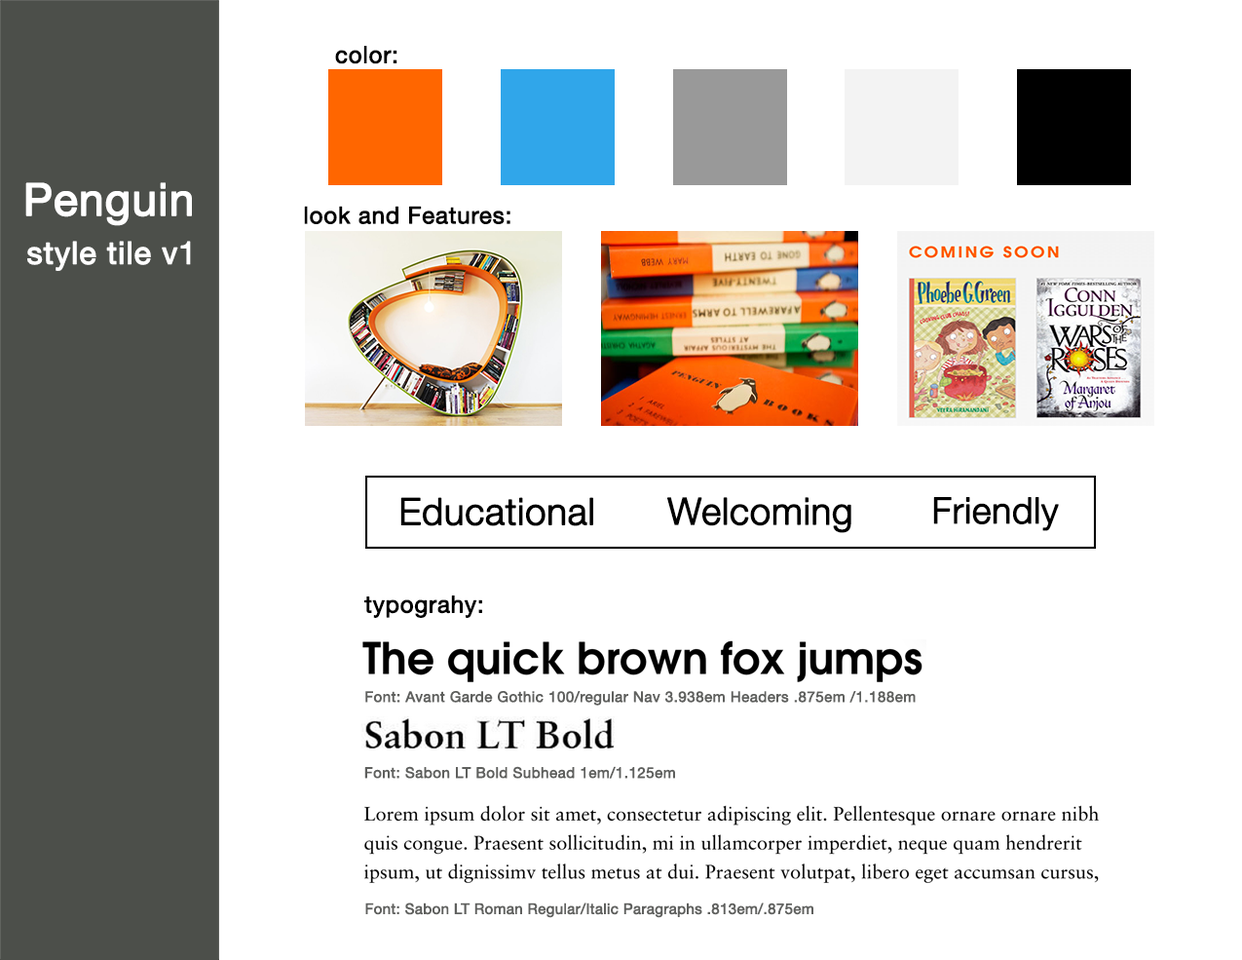
<style>
.page{position:relative;width:1242px;height:960px;background:#ffffff}
.page>*{position:absolute;margin:0}
.t1{font:23.4px "HelveticaNeue";letter-spacing:0.01em;color:#000000;font-weight:bold}
.t2{font:44.8px "HelveticaNeue";color:#ffffff;font-weight:bold}
.t3{font:46.8px "HelveticaNeue";color:#ffffff;font-weight:bold}
.t4{font:31.2px "HelveticaNeue";letter-spacing:0.01em;color:#ffffff;font-weight:bold}
.t5{font:37px "HelveticaNeue-Light";color:#000000;font-weight:bold}
.t6{font:36.1px "HelveticaNeue-Light";color:#000000;font-weight:bold}
.t7{font:14.6px "HelveticaNeue";letter-spacing:0.01em;color:#5f605e;font-weight:bold}
.t8{font:14.6px "HelveticaNeue";color:#5f605e;font-weight:bold}
</style>
<div class="page">
<p class="t1" style="left:335px;top:46px;width:63px;height:18px">color:</p>
<p class="t2" style="left:25px;top:182px;width:167px;height:44px"><span class="t3"><br></span>Penguin</p>
<p class="t1" style="left:304px;top:206px;width:207px;height:18px">look and Features:</p>
<p class="t4" style="left:27px;top:241px;width:164px;height:30px">style tile v1</p>
<p class="t5" style="left:400px;top:497px;width:193px;height:29px">Educational</p>
<p class="t5" style="left:667px;top:497px;width:185px;height:36px">Welcoming</p>
<p class="t6" style="left:933px;top:497px;width:126px;height:34px">Friendly</p>
<p class="t1" style="left:364px;top:595px;width:118px;height:23px">typograhy:</p>
<p class="t7" style="left:365px;top:691px;width:551px;height:14px">Font: Avant Garde Gothic 100/regular Nav 3.938em Headers .875em /1.188em</p>
<p class="t7" style="left:364px;top:766px;width:311px;height:13px">Font: Sabon LT Bold Subhead 1em/1.125em</p>
<p class="t8" style="left:365px;top:902px;width:449px;height:16px">Font: Sabon LT Roman Regular/Italic Paragraphs .813em/.875em</p>
</div>
